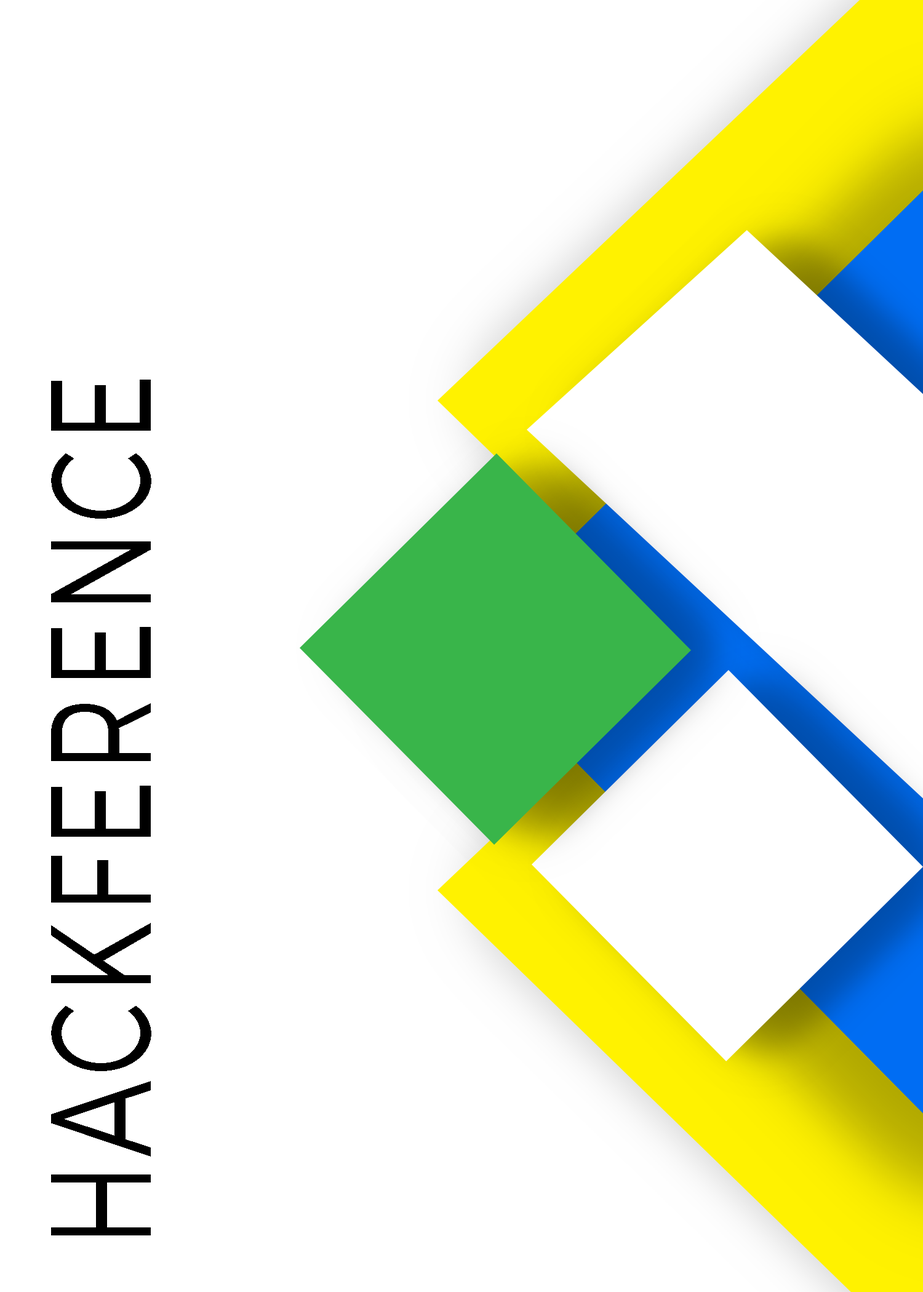
<style>
.page{position:relative;width:923px;height:1292px;background:#ffffff}
.page>*{position:absolute;margin:0}
.t1{font:142px "Montserrat-Light";letter-spacing:0.06em;color:#000000;text-transform:uppercase;scale:0.75 1}
</style>
<div class="page">
<p class="t1" style="left:51px;top:380px;width:100px;height:855px;rotate:-90deg">hackference</p>
</div>
